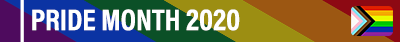
<style>
.page{position:relative;width:400px;height:42px}
.page>*{position:absolute;margin:0}
.t1{font:30px "AcuminProCond-Bold";color:#ffffff;text-transform:uppercase}
</style>
<div class="page">
<p class="t1" style="left:32px;top:9px;width:208px;height:22px">Pride Month 2020</p>
</div>
